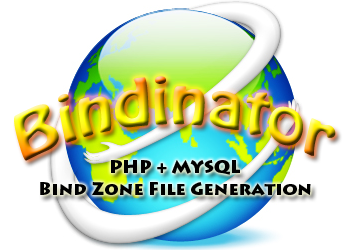
<style>
.page{position:relative;width:350px;height:250px;background:#ffffff}
.page>*{position:absolute;margin:0}
.t1{font:60px "HoboStd"}
.t2{font:18px "LithosPro-Black";color:#000000}
</style>
<div class="page">
<p class="t1" style="left:14px;top:76px;width:322px;height:85px">Bindinator</p>
<p class="t2" style="left:40px;top:160px;width:271px;height:36px;text-align:center">PHP + MYSQL<br>Bind Zone File Generation</p>
</div>
